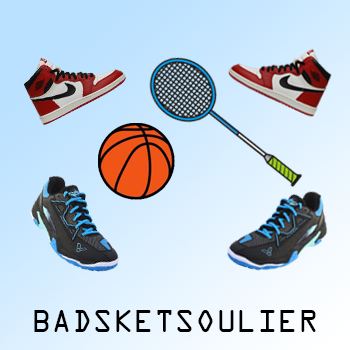
<style>
.page{position:relative;width:350px;height:350px}
.page>*{position:absolute;margin:0}
.t1{font:34px "OCRAExtended";color:#000000}
</style>
<div class="page">
<p class="t1" style="left:34px;top:310px;width:282px;height:22px">BADSKETSOULIER</p>
</div>
